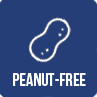
<style>
.page{position:relative;width:97px;height:97px;background:#253e77}
.page>*{position:absolute;margin:0}
.t1{font:18px "BebasNeue";color:#ffffff}
</style>
<div class="page">
<p class="t1" style="left:13px;top:73px;width:73px;height:13px">peanut-free</p>
</div>
